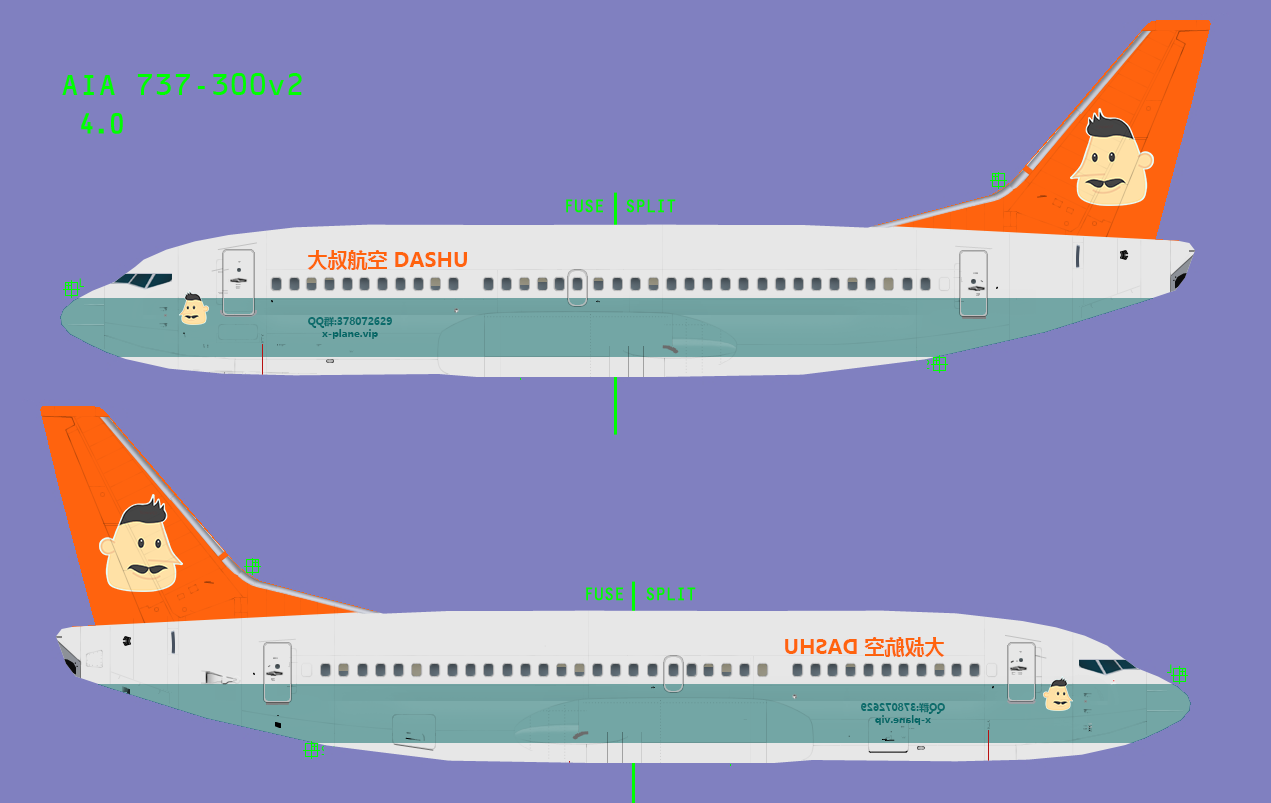
<style>
.page{position:relative;width:1271px;height:803px;background:#8080c0}
.page>*{position:absolute;margin:0}
.t1{font:20px "MicrosoftYaHeiUI-Bold";color:#ff630e}
.t2{font:10px "MicrosoftYaHeiUI-Bold";color:#006564}
</style>
<div class="page">
<p class="t1" style="left:307px;top:250px;width:160px;height:20px">大叔航空 DASHU</p>
<p class="t2" style="left:308px;top:316px;width:84px;height:23px;text-align:center">QQ群:378072629<br>x-plane.vip</p>
<p class="t1" style="left:785px;top:637px;width:160px;height:20px;rotate:180deg">大叔航空 DASHU</p>
<p class="t2" style="left:861px;top:702px;width:84px;height:23px;text-align:center;rotate:180deg">QQ群:378072629<br>x-plane.vip</p>
</div>
